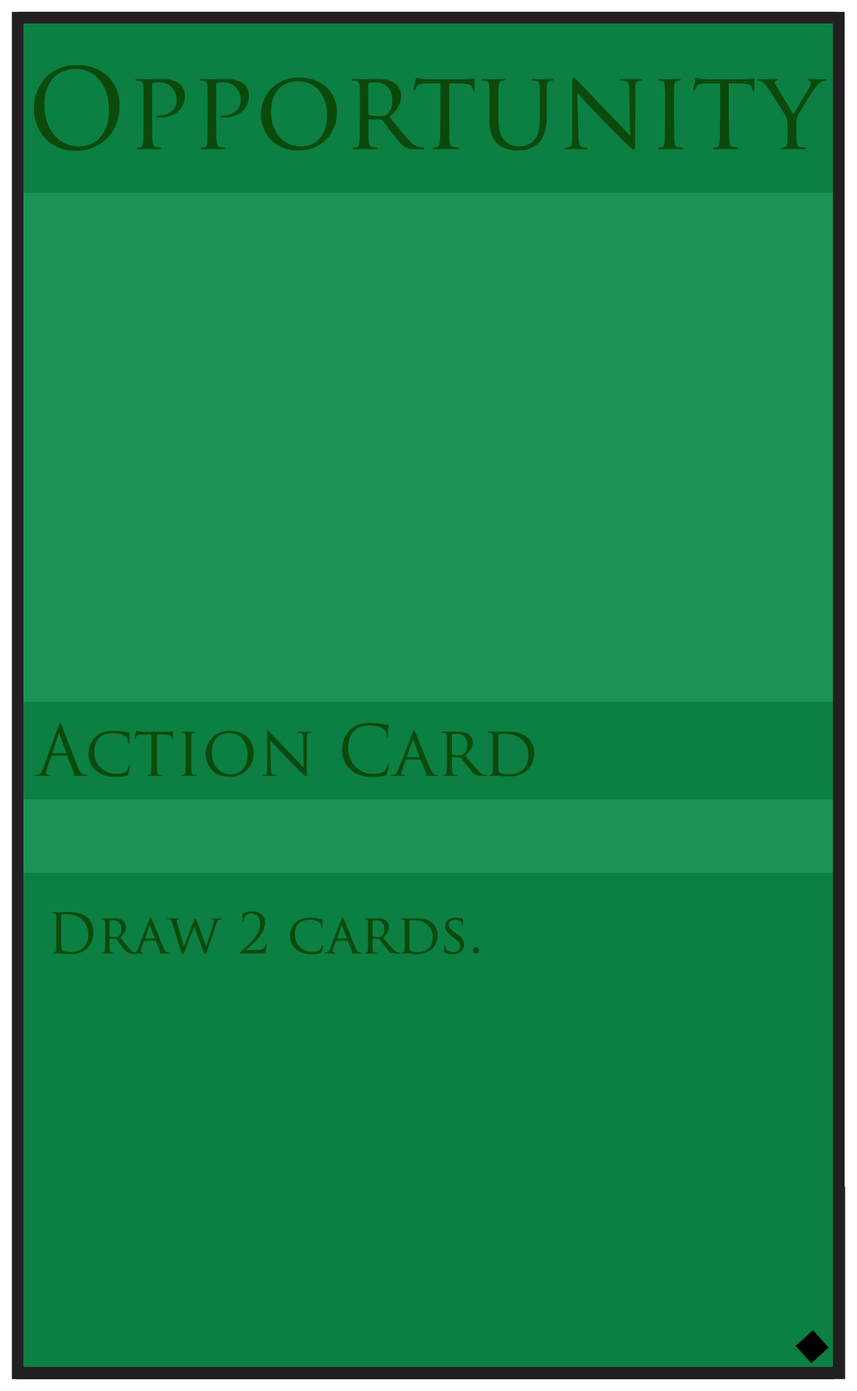
<style>
.page{position:relative;width:857px;height:1391px;background:#0c7f42}
.page>*{position:absolute;margin:0}
.t1{font:109.1px "TrajanPro-Regular";color:#0c4a0c}
.t2{font:68.9px "TrajanPro-Regular";color:#0c4a0c}
.t3{font:54.5px "TrajanPro-Regular";color:#0c4a0c}
</style>
<div class="page">
<p class="t1" style="left:34px;top:65px;width:793px;height:86px">Opportunity</p>
<p class="t2" style="left:34px;top:723px;width:501px;height:54px">Action Card</p>
<p class="t3" style="left:52px;top:912px;width:428px;height:42px">Draw 2 cards.</p>
</div>
